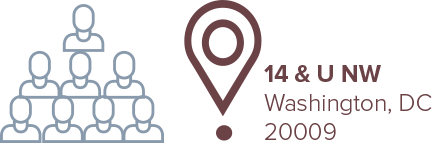
<style>
.page{position:relative;width:432px;height:143px;background:#ffffff}
.page>*{position:absolute;margin:0}
.t1{font:24.2px/29.1px "ProximaNova-Light";color:#6b4246}
.t2{font:24.2px/29.1px "ProximaNova-Bold";color:#6b4246}
</style>
<div class="page">
<p class="t1" style="left:264px;top:65px;width:168px;height:75px"><span class="t2">14 &amp; U NW<br></span>Washington, DC <br>20009</p>
</div>
